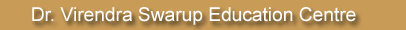
<style>
.page{position:relative;width:406px;height:30px;background:#c89b57}
.page>*{position:absolute;margin:0}
.t1{font:19.2px "ArialMT";color:#ffffff}
</style>
<div class="page">
<p class="t1" style="left:32px;top:7px;width:324px;height:18px">Dr. Virendra Swarup Education Centre</p>
</div>
